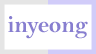
<style>
.page{position:relative;width:96px;height:54px;background:#ffffff}
.page>*{position:absolute;margin:0}
.t1{font:24px "BellMTBold";color:#877ed0}
</style>
<div class="page">
<p class="t1" style="left:8px;top:16px;width:80px;height:23px">inyeong</p>
</div>
